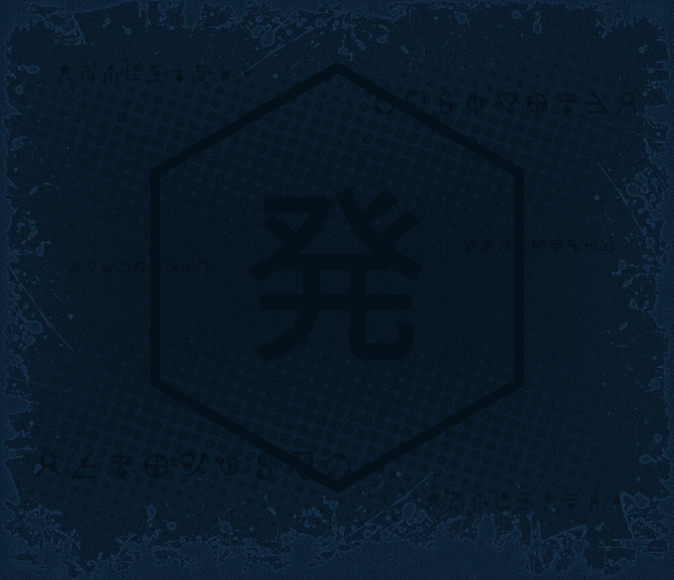
<style>
.page{position:relative;width:674px;height:580px}
.page>*{position:absolute;margin:0}
.t1{font:180px "KozGoPr6N-Regular";color:#04101a;text-transform:uppercase;font-weight:bold}
</style>
<div class="page">
<p class="t1" style="left:248px;top:188px;width:175px;height:175px">発</p>
</div>
